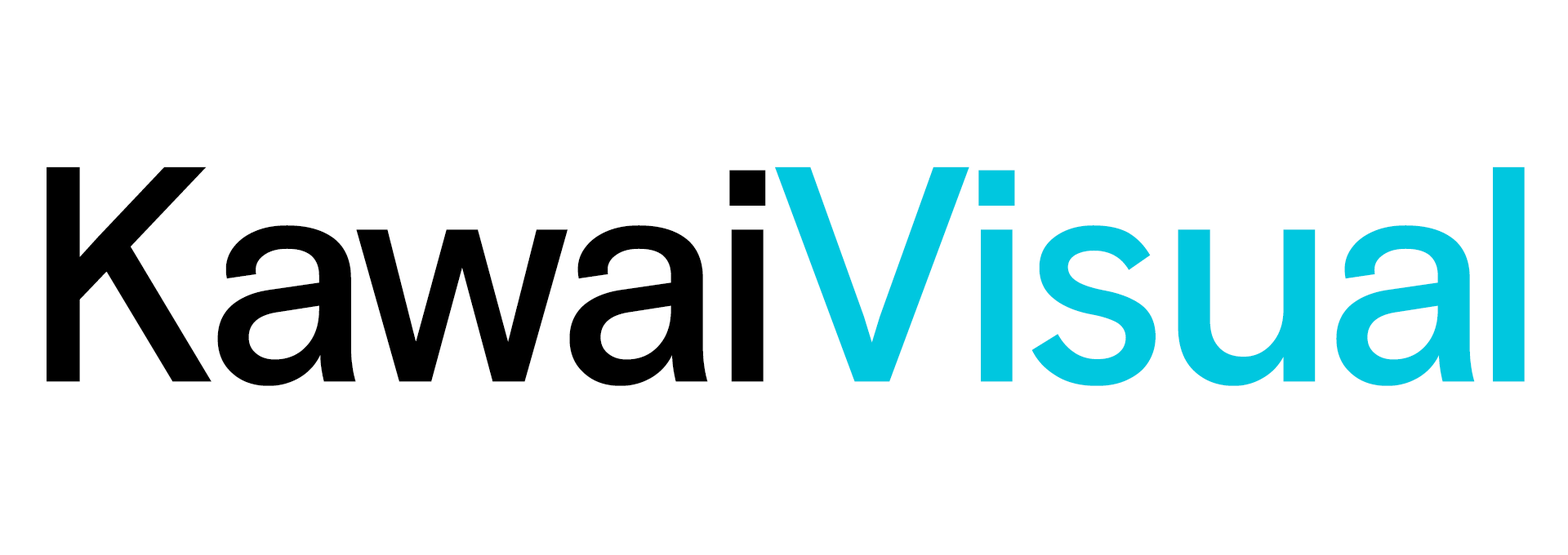
<style>
.page{position:relative;width:1568px;height:555px;background:#ffffff}
.page>*{position:absolute;margin:0}
.t1{font:306.2px "RostelecomBasis-Medium";letter-spacing:-0.03em;color:#00c7df}
.t2{font:306.2px "RostelecomBasis-Medium";letter-spacing:-0.03em;color:#000000}
</style>
<div class="page">
<p class="t1" style="left:47px;top:167px;width:1478px;height:219px"><span class="t2">Kawai</span>Visual</p>
</div>
